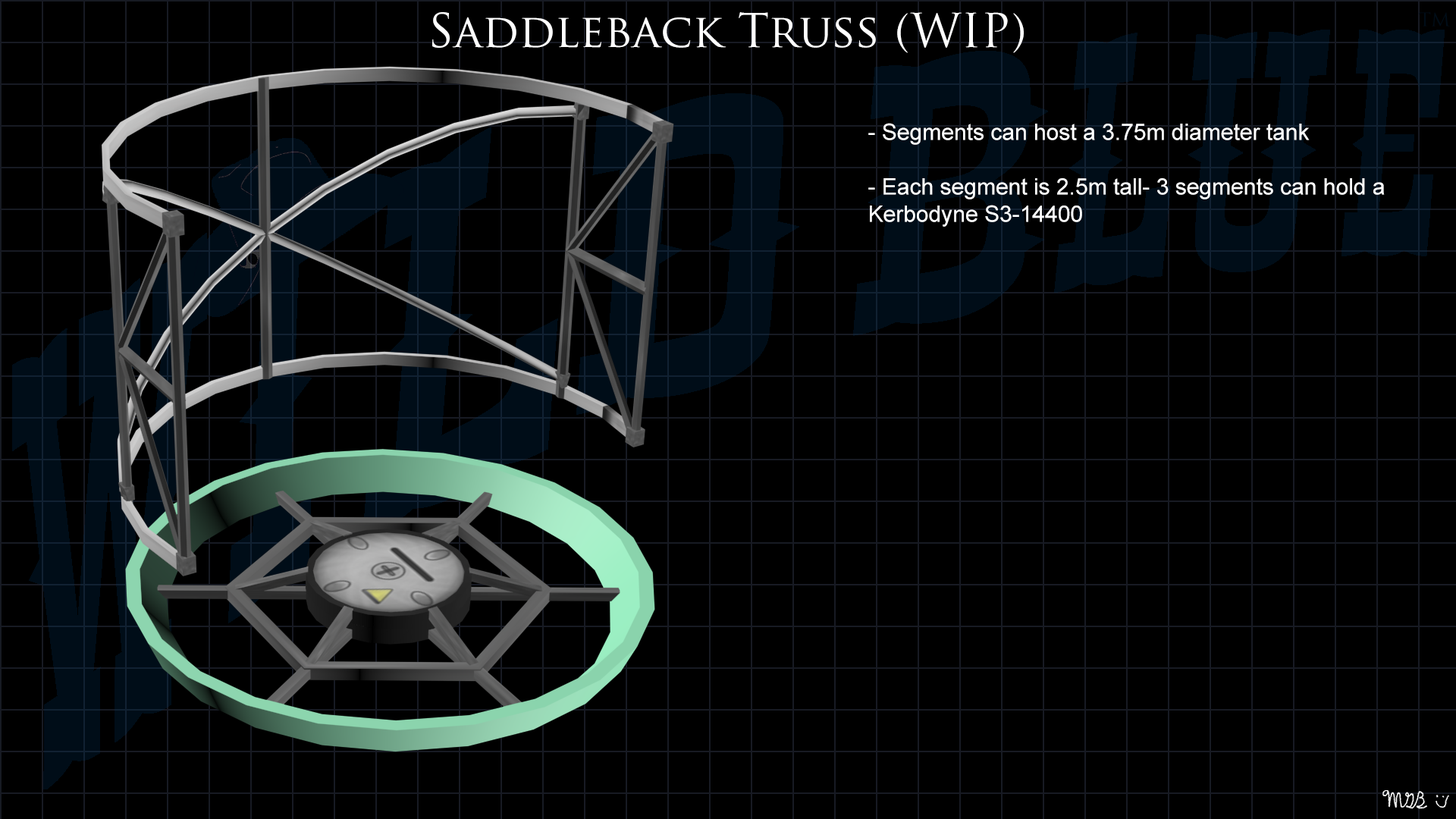
<style>
.page{position:relative;width:1456px;height:819px;background:#000000}
.page>*{position:absolute;margin:0}
.t1{font:45.5px "TrajanPro-Regular";color:#ffffff}
.t2{font:22.7px "ArialMT";color:#ffffff}
</style>
<div class="page">
<p class="t1" style="left:432px;top:12px;width:592px;height:41px">Saddleback Truss (WIP)</p>
<p class="t2" style="left:868px;top:123px;width:517px;height:104px">- Segments can host a 3.75m diameter tank<br><br>- Each segment is 2.5m tall- 3 segments can hold a<br>Kerbodyne S3-14400</p>
</div>
